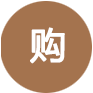
<style>
.page{position:relative;width:93px;height:93px;background:#a4734e}
.page>*{position:absolute;margin:0}
.t1{font:36px "MicrosoftYaHei";color:#ffffff;font-weight:bold}
</style>
<div class="page">
<p class="t1" style="left:30px;top:27px;width:35px;height:37px">购</p>
</div>
